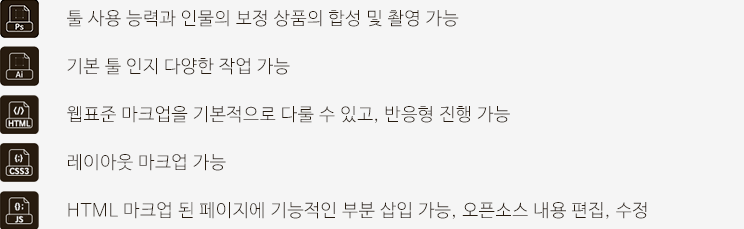
<style>
.page{position:relative;width:744px;height:229px;background:#f5f5f5}
.page>*{position:absolute;margin:0}
.t1{font:18px "NanumBarunGothicOTFLight";letter-spacing:0.035em;color:#271b0f}
</style>
<div class="page">
<p class="t1" style="left:67px;top:10px;width:392px;height:17px">툴 사용 능력과 인물의 보정 상품의 합성 및 촬영 가능</p>
<p class="t1" style="left:67px;top:58px;width:223px;height:17px">기본 툴 인지 다양한 작업 가능</p>
<p class="t1" style="left:67px;top:106px;width:443px;height:17px">웹표준 마크업을 기본적으로 다룰 수 있고, 반응형 진행 가능</p>
<p class="t1" style="left:68px;top:154px;width:158px;height:17px">레이아웃 마크업 가능</p>
<p class="t1" style="left:68px;top:202px;width:579px;height:17px">HTML 마크업 된 페이지에 기능적인 부분 삽입 가능, 오픈소스 내용 편집, 수정</p>
</div>
